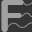
<style>
.page{position:relative;width:32px;height:32px;background:#353535}
.page>*{position:absolute;margin:0}
.t1{font:44.9px "ArialRoundedMTBold";color:#a0a0a0}
</style>
<div class="page">
<p class="t1" style="left:1px;top:0px;width:23px;height:32px">F</p>
</div>
